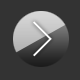
<style>
.page{position:relative;width:80px;height:80px;background:#333333}
.page>*{position:absolute;margin:0}
.t1{font:12px "SimSun-ExtB";letter-spacing:0.05em;color:#ffffff}
</style>
<div class="page">
<p class="t1" style="left:33px;top:21px;width:19px;height:36px">&gt;</p>
</div>
